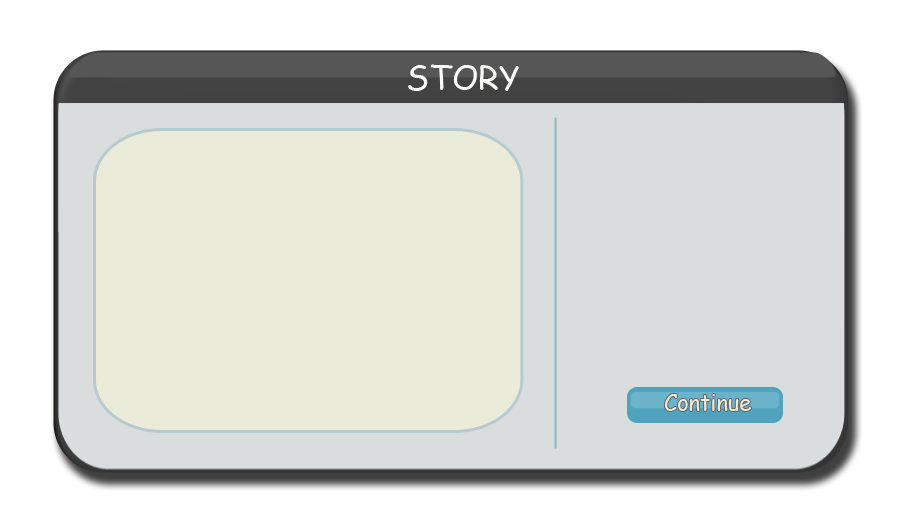
<style>
.page{position:relative;width:910px;height:512px;background:#daddde}
.page>*{position:absolute;margin:0}
.t1{font:33.3px "ComicSansMS";color:#fbfbfa}
.t2{font:23.2px "ComicSansMS";color:#eaebd8;scale:0.94 1}
</style>
<div class="page">
<p class="t1" style="left:408px;top:64px;width:111px;height:27px">STORY</p>
<p class="t2" style="left:664px;top:394px;width:87px;height:17px">Continue</p>
</div>
